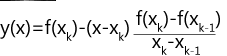
<style>
.page{position:relative;width:227px;height:56px;background:#ffffff}
.page>*{position:absolute;margin:0}
.t1{font:20px "MicrosoftTaiLe";color:#000000}
</style>
<div class="page">
<p class="t1" style="left:0px;top:10px;width:220px;height:45px">y(x)=f(xk)-(x-xk) f(xk)-f(xk-1)<br>           xk-xk-1</p>
</div>
